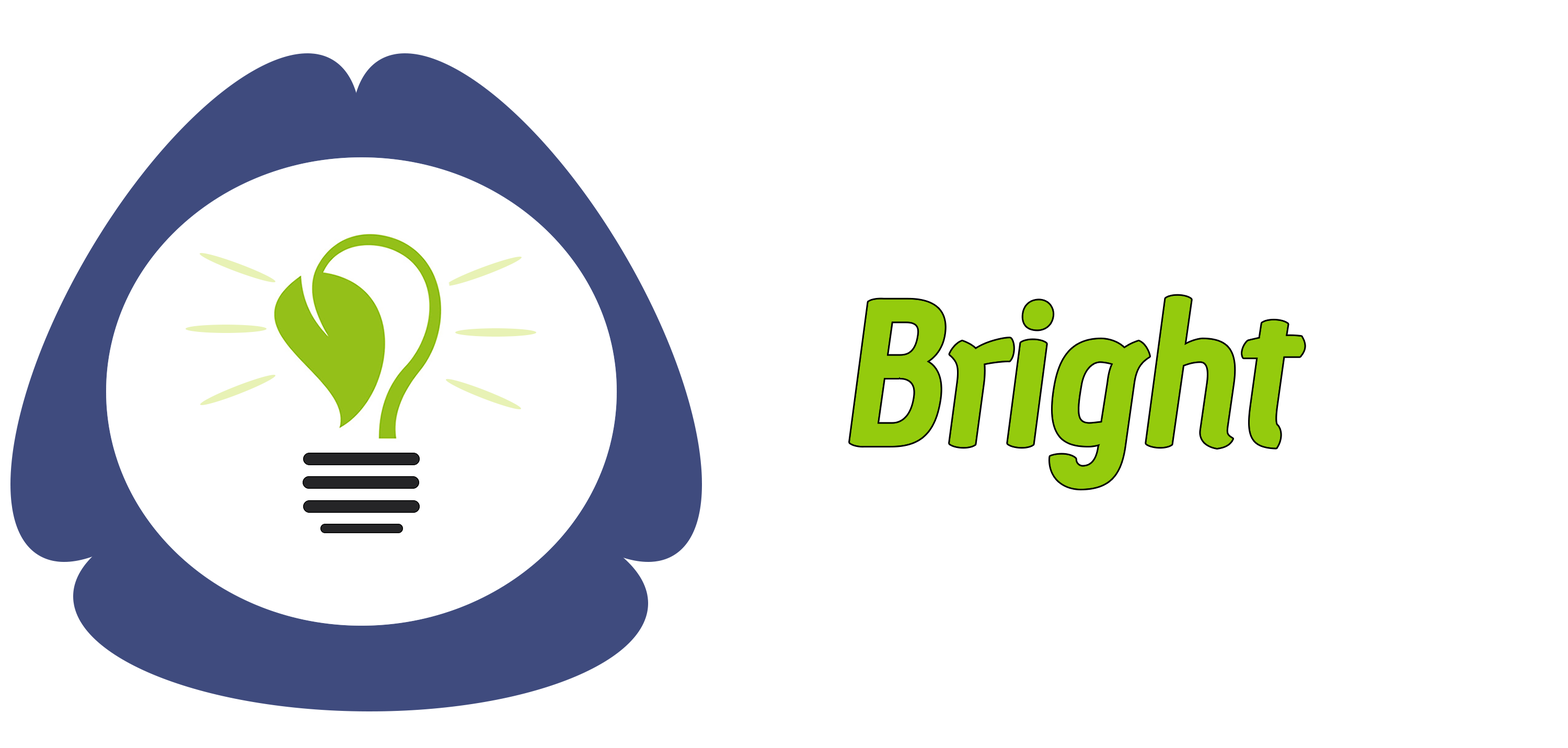
<style>
.page{position:relative;width:1568px;height:748px;background:#ffffff}
.page>*{position:absolute;margin:0}
.t1{font:209.2px "Ledare-BoldItalicPERSONALUSEONLY";color:#94c019}
</style>
<div class="page">
<p class="t1" style="left:850px;top:295px;width:455px;height:194px">Bright</p>
</div>
